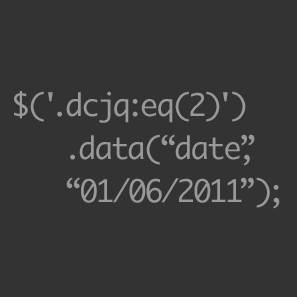
<style>
.page{position:relative;width:297px;height:297px;background:#333333}
.page>*{position:absolute;margin:0}
.t1{font:30px/43px "Monaco";letter-spacing:-0.025em;color:#999999}
</style>
<div class="page">
<p class="t1" style="left:14px;top:91px;width:266px;height:118px">$('.dcjq:eq(2)')<br>   .data(“date”,<br>   “01/06/2011”);</p>
</div>
